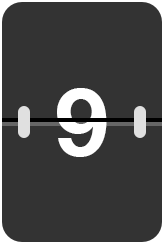
<style>
.page{position:relative;width:165px;height:245px;background:#333333}
.page>*{position:absolute;margin:0}
.t1{font:96px "HelveticaNeue-Bold";color:#ffffff}
</style>
<div class="page">
<p class="t1" style="left:57px;top:88px;width:50px;height:69px">9</p>
</div>
